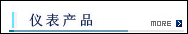
<style>
.page{position:relative;width:188px;height:34px;background:#ffffff}
.page>*{position:absolute;margin:0}
.t1{font:14px "SimSun";letter-spacing:0.2em;color:#021446}
</style>
<div class="page">
<p class="t1" style="left:29px;top:13px;width:63px;height:14px">仪表产品</p>
</div>
